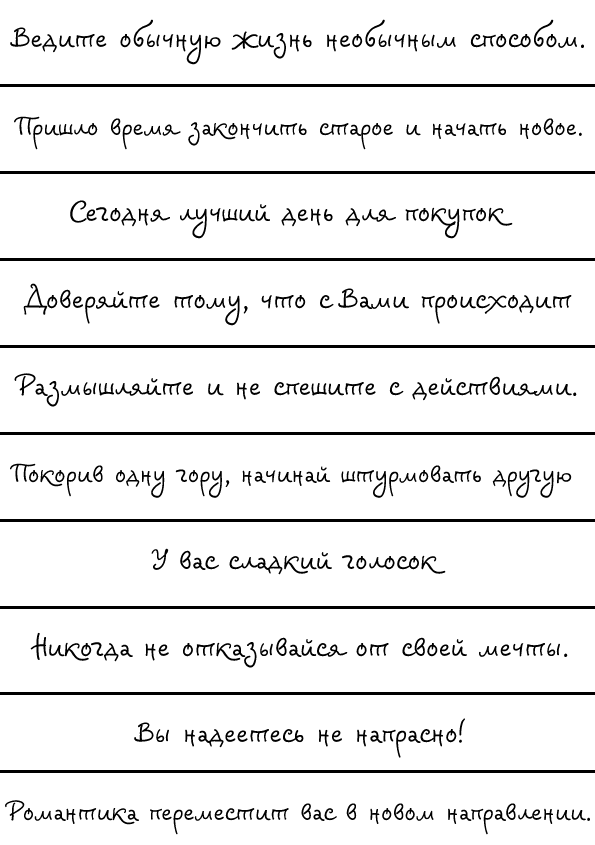
<style>
.page{position:relative;width:595px;height:845px;background:#ffffff}
.page>*{position:absolute;margin:0}
.t1{font:23px "Veles-Regular";color:#000000}
.t2{font:21px "Veles-Regular";color:#000000}
</style>
<div class="page">
<p class="t1" style="left:10px;top:19px;width:575px;height:46px">Ведите обычную жизнь необычным способом.</p>
<p class="t2" style="left:13px;top:116px;width:569px;height:34px">Пришло время закончить старое и начать новое.</p>
<p class="t1" style="left:70px;top:200px;width:443px;height:39px">Сегодня лучший день для покупок</p>
<p class="t1" style="left:23px;top:283px;width:549px;height:43px">Доверяйте тому, что с Вами происходит</p>
<p class="t1" style="left:14px;top:373px;width:563px;height:34px">Размышляйте и не спешите с действиями.</p>
<p class="t2" style="left:9px;top:463px;width:563px;height:35px">Покорив одну гору, начинай штурмовать другую</p>
<p class="t1" style="left:151px;top:548px;width:295px;height:27px">У вас сладкий голосок</p>
<p class="t1" style="left:30px;top:632px;width:538px;height:36px">Никогда не отказывайся от своей мечты.</p>
<p class="t1" style="left:134px;top:718px;width:332px;height:40px">Вы надеетесь не напрасно!</p>
<p class="t2" style="left:5px;top:800px;width:586px;height:35px">Романтика переместит вас в новом направлении.</p>
</div>
